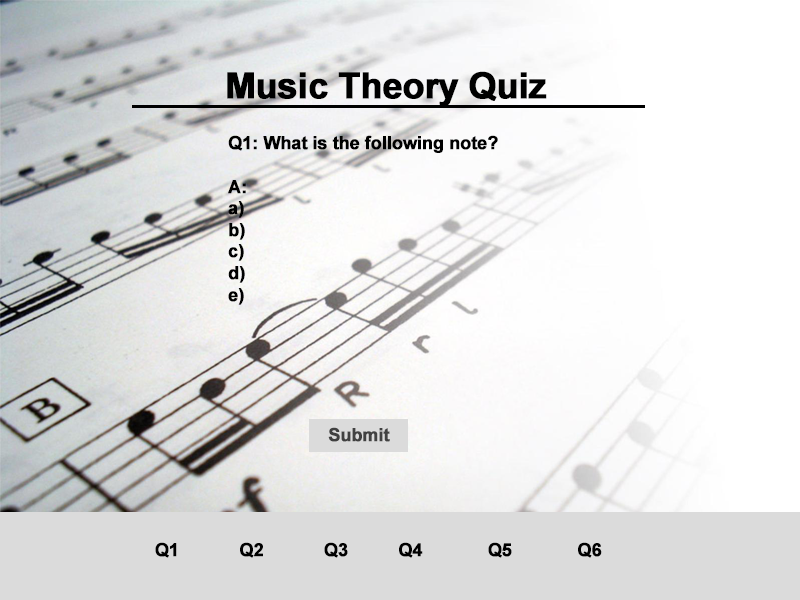
<style>
.page{position:relative;width:800px;height:600px}
.page>*{position:absolute;margin:0}
.t1{font:36px "Arial-BoldMT";letter-spacing:-0.025em;color:#000000;font-weight:bold}
.t2{font:18px "Arial-BoldMT";letter-spacing:-0.025em;color:#000000;font-weight:bold}
.t3{font:18px "Arial-BoldMT";letter-spacing:-0.025em;color:#414141;font-weight:bold}
</style>
<div class="page">
<p class="t1" style="left:227px;top:71px;width:320px;height:36px">Music Theory Quiz</p>
<p class="t2" style="left:228px;top:135px;width:270px;height:170px">Q1: What is the following note?<br><br>A:<br>a)<br>b)<br>c)<br>d)<br>e)</p>
<p class="t3" style="left:328px;top:427px;width:62px;height:15px">Submit</p>
<p class="t2" style="left:155px;top:542px;width:447px;height:16px">Q1            Q2            Q3          Q4             Q5             Q6</p>
</div>
